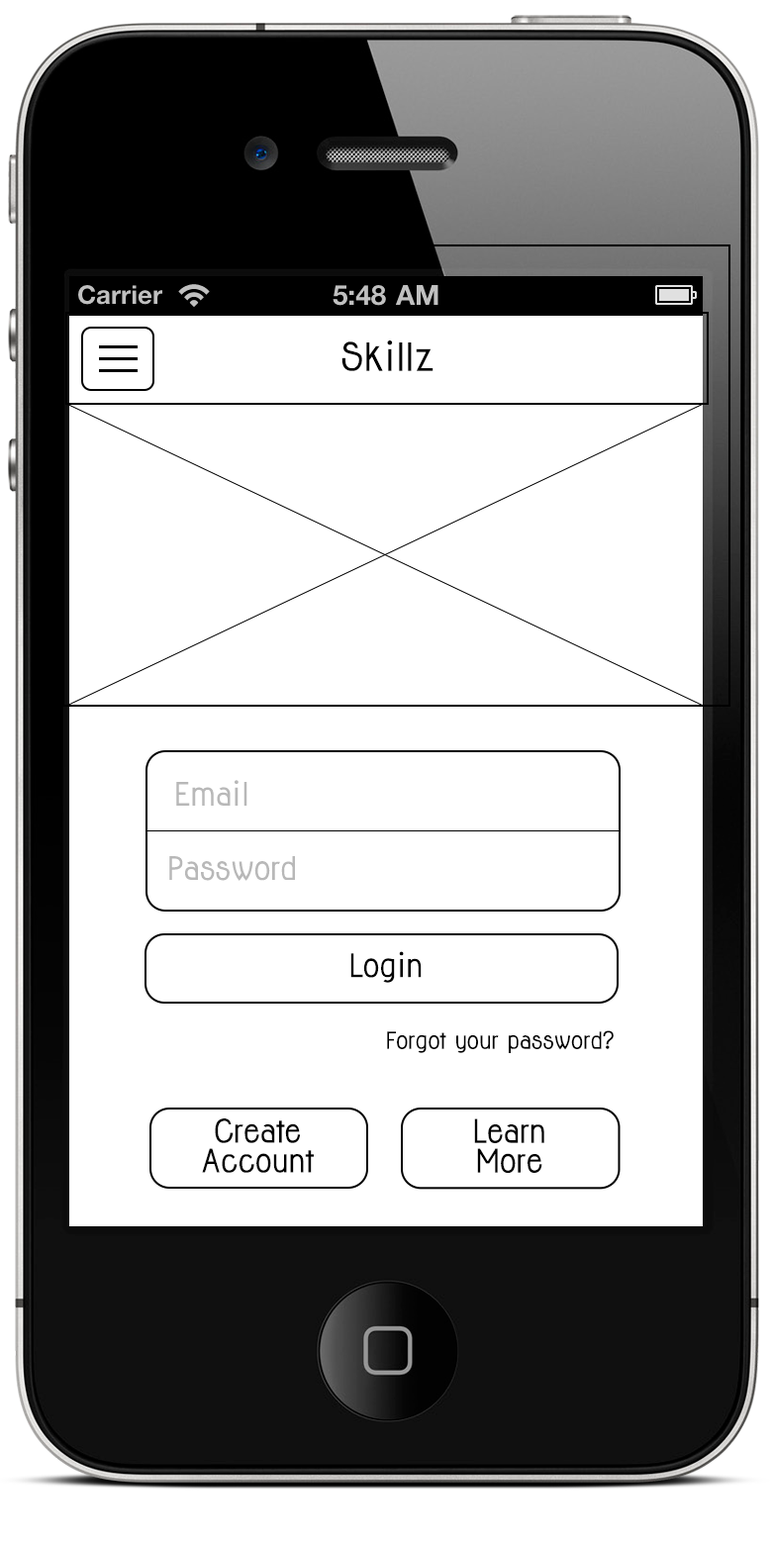
<style>
.page{position:relative;width:772px;height:1545px;background:#ffffff}
.page>*{position:absolute;margin:0}
.t1{font:35.6px "Jolly-Bold";color:#000000}
.t2{font:29.7px "Jolly-Bold";color:#b8b8b8}
.t3{font:29.7px "Jolly-Bold";color:#000000}
.t4{font:21.8px "Jolly-Bold";color:#000000}
.t5{font:29.7px/29.7px "Jolly-Bold";color:#000000}
.t6{font:29.8px/29.8px "Jolly-Bold";color:#000000}
</style>
<div class="page">
<p class="t1" style="left:341px;top:340px;width:92px;height:31px">Skillz</p>
<p class="t2" style="left:176px;top:780px;width:71px;height:26px">Email</p>
<p class="t2" style="left:169px;top:856px;width:126px;height:25px">Password</p>
<p class="t3" style="left:350px;top:951px;width:72px;height:32px">Login</p>
<p class="t4" style="left:387px;top:1030px;width:227px;height:23px">Forgot your password?</p>
<p class="t5" style="left:202px;top:1118px;width:112px;height:55px;text-align:center">Create<br>Account</p>
<p class="t6" style="left:474px;top:1118px;width:70px;height:55px;text-align:center">Learn<br>More</p>
</div>
